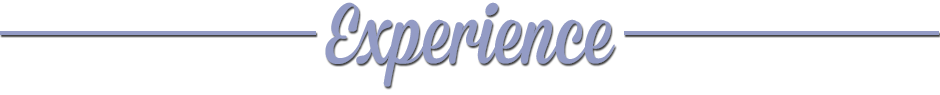
<style>
.page{position:relative;width:940px;height:95px;background:#ffffff}
.page>*{position:absolute;margin:0}
.t1{font:85px "Mission-Script";color:#939cc5}
</style>
<div class="page">
<p class="t1" style="left:325px;top:2px;width:290px;height:85px">Experience</p>
</div>
